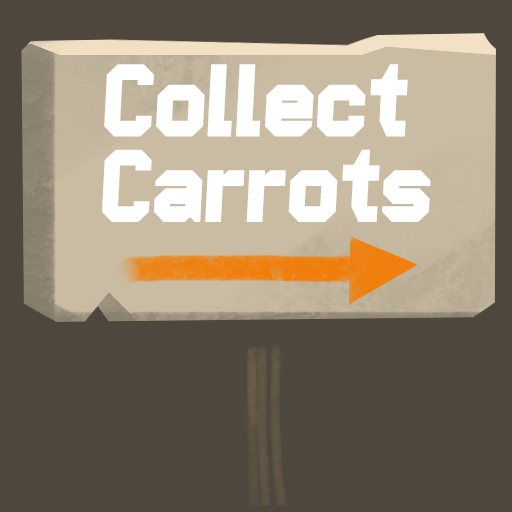
<style>
.page{position:relative;width:512px;height:512px;background:#4d473e}
.page>*{position:absolute;margin:0}
.t1{font:102.8px/85.7px "PopWarner";color:#ffffff}
</style>
<div class="page">
<p class="t1" style="left:102px;top:64px;width:329px;height:158px;text-align:center">Collect <br>Carrots</p>
</div>
